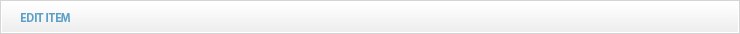
<style>
.page{position:relative;width:740px;height:34px}
.page>*{position:absolute;margin:0}
.t1{font:12px "MyriadPro-Semibold";letter-spacing:-0.01em;color:#5ca0c7;text-transform:uppercase}
</style>
<div class="page">
<p class="t1" style="left:21px;top:13px;width:49px;height:9px">Edit ITEM</p>
</div>
